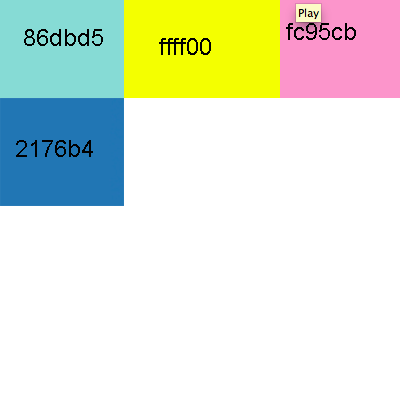
<style>
.page{position:relative;width:400px;height:400px;background:#ffffff}
.page>*{position:absolute;margin:0}
.t1{font:24px "ArialMT";color:#000000}
</style>
<div class="page">
<p class="t1" style="left:24px;top:29px;width:79px;height:17px">86dbd5</p>
<p class="t1" style="left:286px;top:23px;width:70px;height:17px">fc95cb</p>
<p class="t1" style="left:159px;top:38px;width:52px;height:17px">ffff00</p>
<p class="t1" style="left:16px;top:140px;width:77px;height:17px">2176b4</p>
</div>
